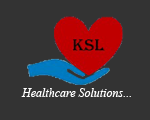
<style>
.page{position:relative;width:150px;height:120px;background:#333333}
.page>*{position:absolute;margin:0}
.t1{font:12px "TimesNewRomanPS-ItalicMT";color:#ffffff}
</style>
<div class="page">
<p class="t1" style="left:21px;top:88px;width:110px;height:9px">Healthcare Solutions...</p>
</div>
